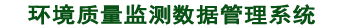
<style>
.page{position:relative;width:350px;height:28px;background:#ffffff}
.page>*{position:absolute;margin:0}
.t1{font:21px "SimHei";letter-spacing:0.1em;color:#095215;font-weight:bold;scale:1.09 1}
</style>
<div class="page">
<p class="t1" style="left:28px;top:4px;width:287px;height:21px">环境质量监测数据管理系统</p>
</div>
